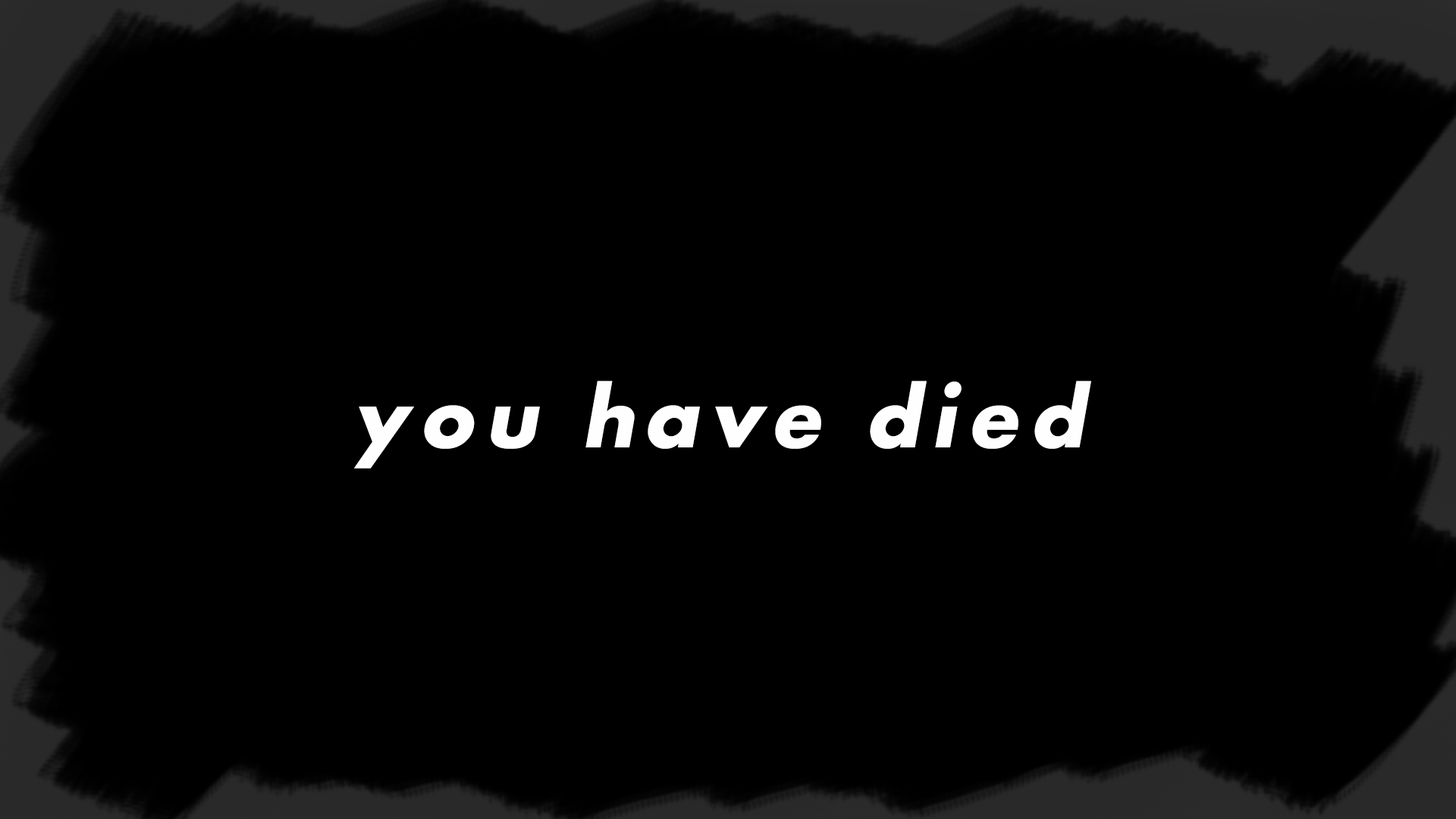
<style>
.page{position:relative;width:1456px;height:819px;background:#000000}
.page>*{position:absolute;margin:0}
.t1{font:91px "FuturaPT-Bold";letter-spacing:0.12em;color:#fefefe;font-style:italic}
</style>
<div class="page">
<p class="t1" style="left:354px;top:381px;width:737px;height:88px">you have died</p>
</div>
